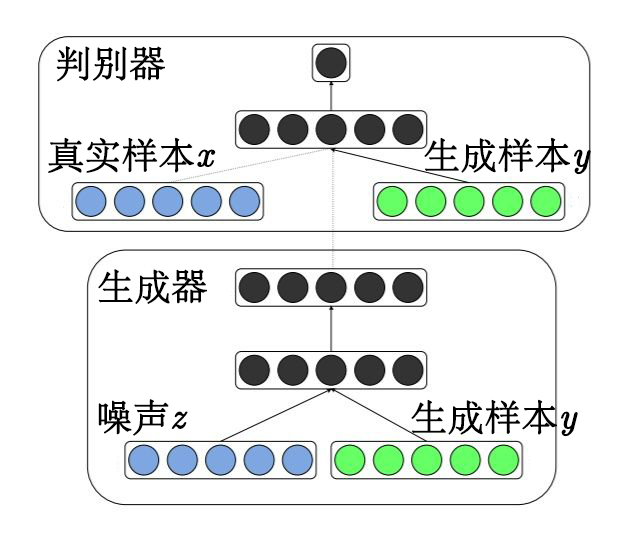
<style>
.page{position:relative;width:631px;height:542px;background:#ffffff}
.page>*{position:absolute;margin:0}
.t1{font:36px "STSong";color:#000000;font-weight:bold}
.t2{font:36px "Euclid-Italic";color:#000000;font-weight:bold}
</style>
<div class="page">
<p class="t1" style="left:56px;top:46px;width:109px;height:36px">判别器</p>
<p class="t1" style="left:48px;top:137px;width:168px;height:36px">真实样本<span class="t2">x</span></p>
<p class="t1" style="left:424px;top:137px;width:167px;height:38px">生成样本<span class="t2">y</span></p>
<p class="t1" style="left:98px;top:269px;width:109px;height:35px">生成器</p>
<p class="t1" style="left:98px;top:399px;width:90px;height:37px">噪声<span class="t2">z</span></p>
<p class="t1" style="left:411px;top:399px;width:167px;height:38px">生成样本<span class="t2">y</span></p>
</div>
